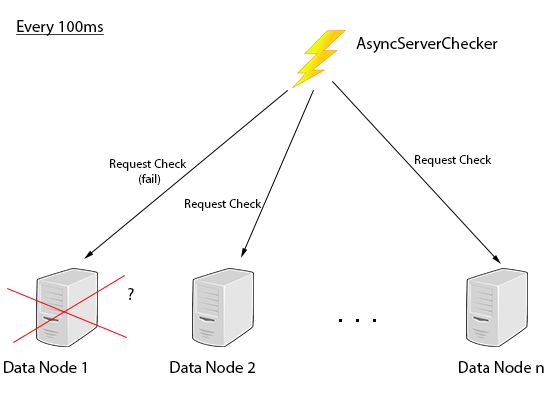
<style>
.page{position:relative;width:550px;height:400px;background:#ffffff}
.page>*{position:absolute;margin:0}
.t1{font:16.7px "MyriadPro-Regular";color:#000000;text-decoration:underline}
.t2{font:16.7px "MyriadPro-Regular";color:#000000}
.t3{font:12.5px "MyriadPro-Regular";color:#000000}
</style>
<div class="page">
<p class="t1" style="left:16px;top:20px;width:88px;height:16px">Every 100ms</p>
<p class="t2" style="left:356px;top:37px;width:142px;height:16px">AsyncServerChecker</p>
<p class="t3" style="left:110px;top:159px;width:77px;height:26px">Request Check<br>           (fail)</p>
<p class="t3" style="left:415px;top:155px;width:77px;height:12px">Request Check</p>
<p class="t3" style="left:185px;top:199px;width:77px;height:12px">Request Check</p>
<p class="t2" style="left:128px;top:288px;width:6px;height:12px">?</p>
<p class="t2" style="left:4px;top:361px;width:82px;height:12px">Data Node 1</p>
<p class="t2" style="left:170px;top:361px;width:85px;height:12px">Data Node 2</p>
<p class="t2" style="left:459px;top:361px;width:85px;height:12px">Data Node n</p>
</div>
